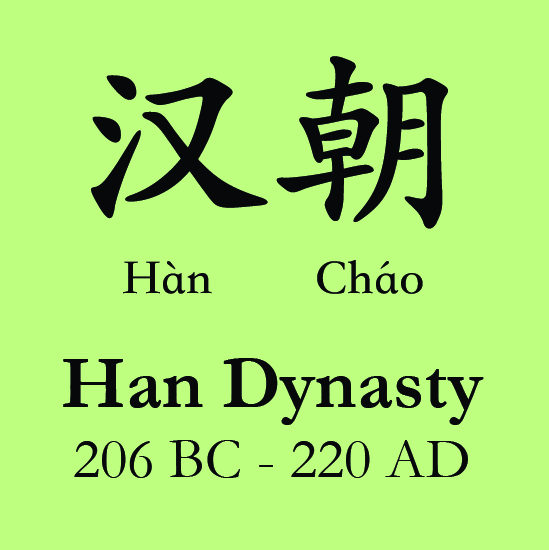
<style>
.page{position:relative;width:549px;height:550px;background:#bfff80}
.page>*{position:absolute;margin:0}
.t1{font:200px "STKaiti-SC-Bold";color:#070809}
.t2{font:50px "STKaiti-SC-Bold";color:#070809}
.t3{font:58.3px "Garamond";color:#070809}
.t4{font:75px "Garamond-Bold";color:#070809}
</style>
<div class="page">
<p class="t1" style="left:91px;top:56px;width:357px;height:173px">汉朝</p>
<p class="t2" style="left:123px;top:261px;width:89px;height:33px">Hàn</p>
<p class="t2" style="left:317px;top:260px;width:106px;height:34px">Cháo</p>
<p class="t3" style="left:63px;top:358px;width:421px;height:120px;text-align:center"><span class="t4">Han Dynasty<br></span>206 BC - 220 AD</p>
</div>
